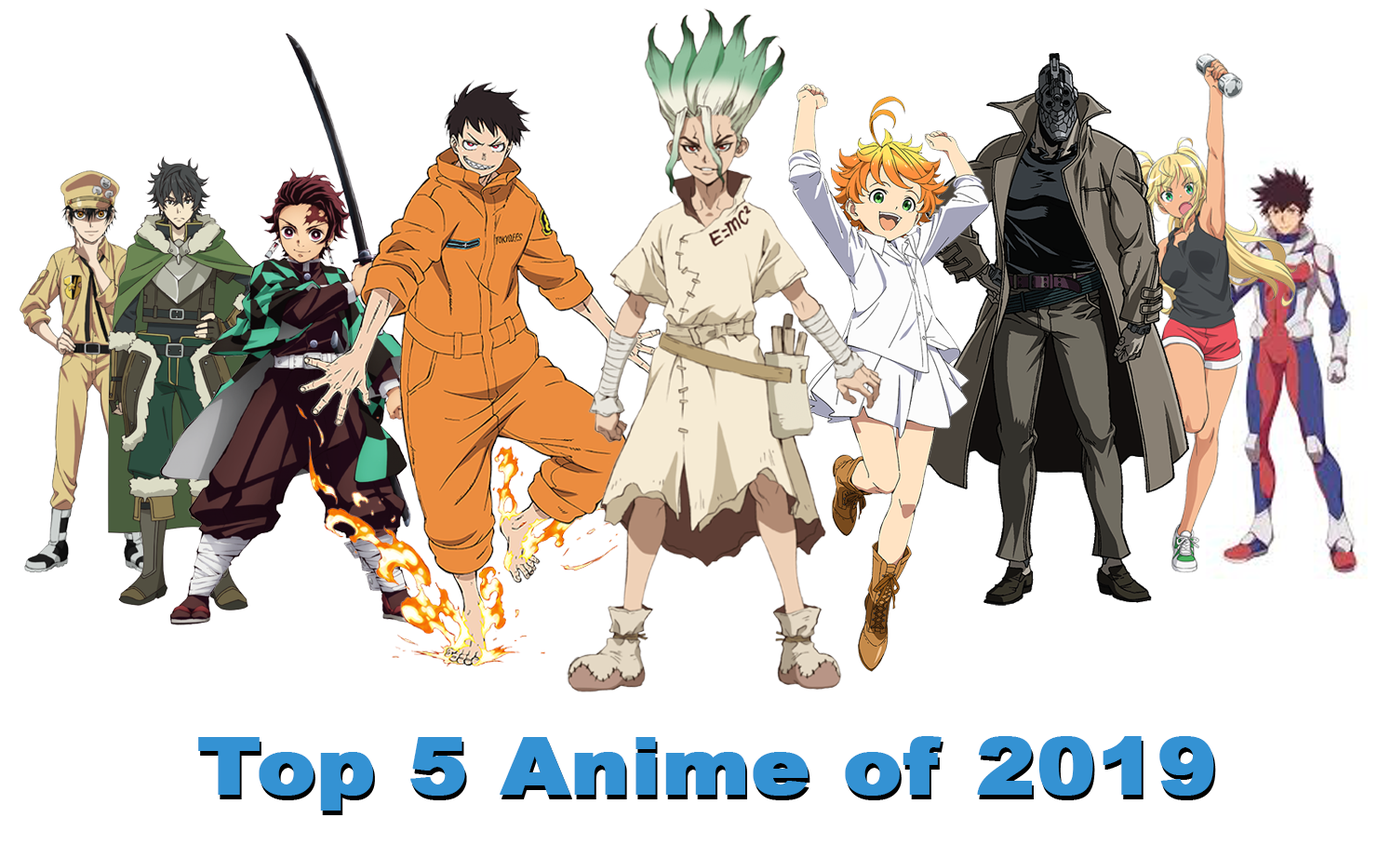
<style>
.page{position:relative;width:1391px;height:858px;background:#ffffff}
.page>*{position:absolute;margin:0}
.t1{font:79.1px "Arial-Black";color:#3492d3;font-weight:bold;scale:1.1 1}
</style>
<div class="page">
<p class="t1" style="left:198px;top:736px;width:1016px;height:74px">Top 5 Anime of 2019</p>
</div>
